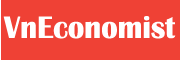
<style>
.page{position:relative;width:180px;height:60px;background:#ef4135}
.page>*{position:absolute;margin:0}
.t1{font:32px "BritannicBold";color:#ffffff;scale:0.94 1}
</style>
<div class="page">
<p class="t1" style="left:3px;top:16px;width:173px;height:23px">VnEconomist</p>
</div>
